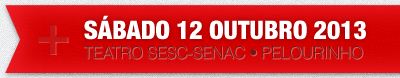
<style>
.page{position:relative;width:400px;height:78px}
.page>*{position:absolute;margin:0}
.t1{font:25.5px "HelveticaNeue-CondensedBlack";color:#ffffff}
.t2{font:60px "HelveticaNeue-Bold";color:#c91414}
.t3{font:16.4px "Helvetica-Light";letter-spacing:-0.025em;color:#791515}
</style>
<div class="page">
<p class="t1" style="left:84px;top:15px;width:282px;height:25px">SÁBADO 12 OUTUBRO 2013</p>
<p class="t2" style="left:37px;top:24px;width:32px;height:31px">+</p>
<p class="t3" style="left:83px;top:46px;width:280px;height:13px">TEATRO SESC-SENAC • PELOURINHO</p>
</div>
